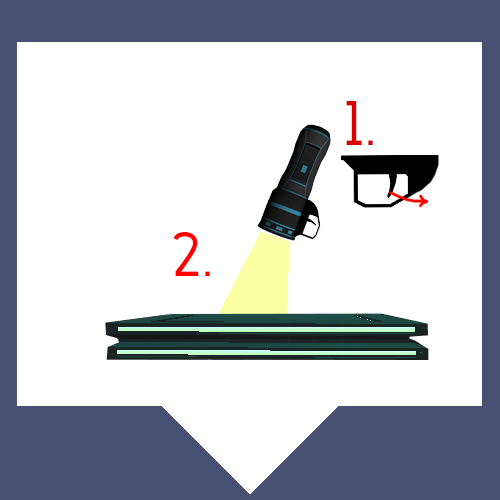
<style>
.page{position:relative;width:500px;height:500px;background:#ffffff}
.page>*{position:absolute;margin:0}
.t1{font:62.5px "Anson-Regular";color:#db0000}
.t2{font:62.5px "Anson-Regular";color:#ff0000}
</style>
<div class="page">
<p class="t1" style="left:346px;top:101px;width:27px;height:44px">1.</p>
<p class="t2" style="left:173px;top:232px;width:37px;height:44px">2.b</p>
</div>
